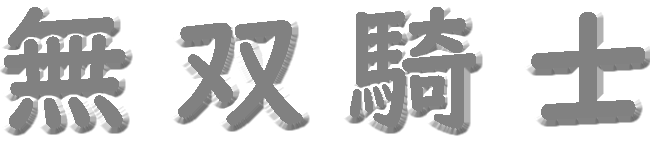
<style>
.page{position:relative;width:650px;height:144px;background:#ffffff}
.page>*{position:absolute;margin:0}
.t1{font:132.9px "UDDigiKyokashoNK-B";color:#818181}
</style>
<div class="page">
<p class="t1" style="left:4px;top:7px;width:641px;height:122px">無 双 騎 士</p>
</div>
